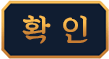
<style>
.page{position:relative;width:109px;height:59px;background:#101d31}
.page>*{position:absolute;margin:0}
.t1{font:31px "SDKukdetopokki-aLt";letter-spacing:0.34em}
</style>
<div class="page">
<p class="t1" style="left:22px;top:15px;width:66px;height:29px">확인</p>
</div>
